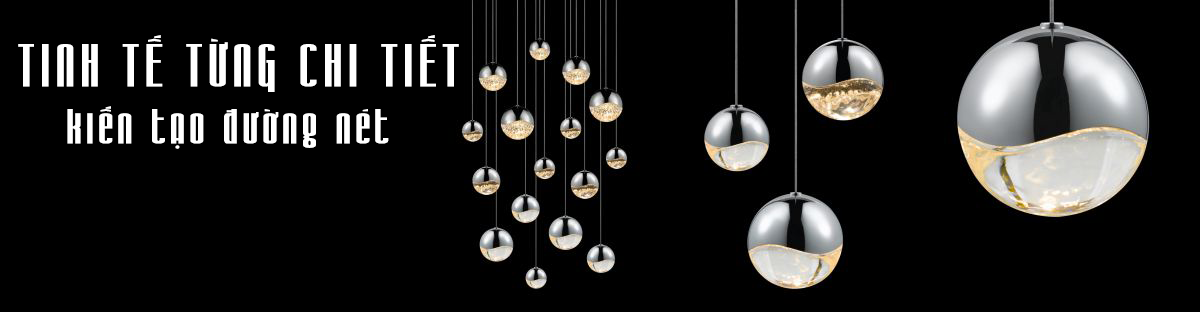
<style>
.page{position:relative;width:1200px;height:312px;background:#000000}
.page>*{position:absolute;margin:0}
.t1{font:53px "UTM-Iron-Gothic";letter-spacing:0.1em;color:#ffffff;scale:1.18 1}
.t2{font:43px "UTM-Iron-Gothic";letter-spacing:0.1em;color:#ffffff;scale:1.18 1}
</style>
<div class="page">
<p class="t1" style="left:18px;top:35px;width:441px;height:57px">TINH TẾ TỪNG CHI TIẾT</p>
<p class="t2" style="left:67px;top:106px;width:322px;height:43px">kiến tạo đường nét</p>
</div>
